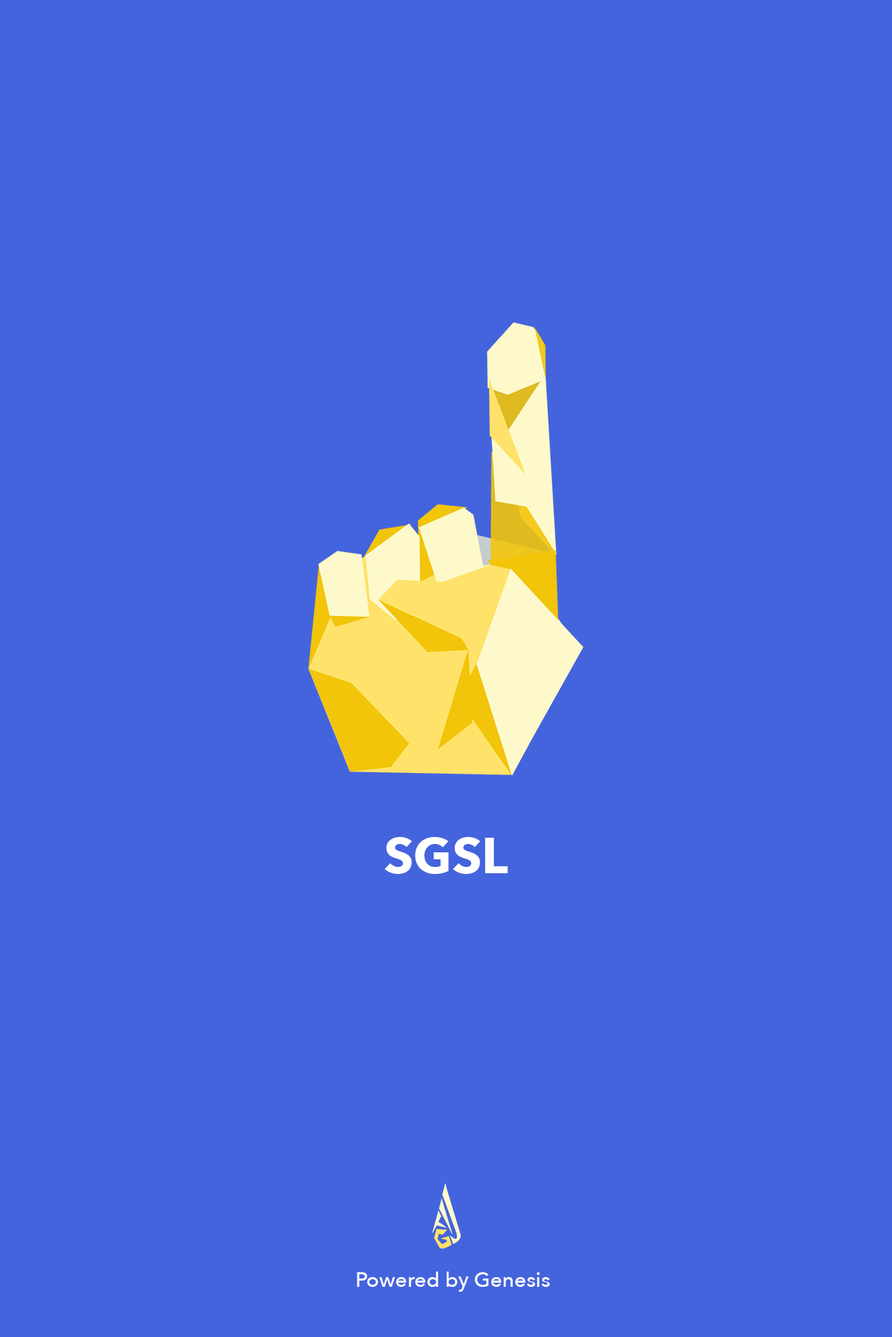
<style>
.page{position:relative;width:892px;height:1337px;background:#4464dd}
.page>*{position:absolute;margin:0}
.t1{font:50.2px "AvenirNext-Bold";color:#ffffff}
.t2{font:20.9px "AvenirNext-Medium";color:#ffffff}
</style>
<div class="page">
<p class="t1" style="left:385px;top:837px;width:123px;height:37px">SGSL</p>
<p class="t2" style="left:357px;top:1272px;width:193px;height:20px">Powered by Genesis</p>
</div>
